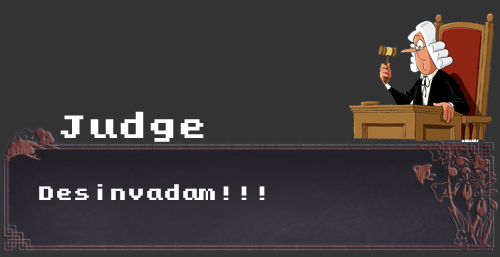
<style>
.page{position:relative;width:500px;height:257px;background:#333333}
.page>*{position:absolute;margin:0}
.t1{font:30px "KongtextRegular";color:#ffffff}
.t2{font:18px "KongtextRegular";color:#fefefe}
</style>
<div class="page">
<p class="t1" style="left:60px;top:111px;width:144px;height:31px">Judge</p>
<p class="t2" style="left:39px;top:184px;width:226px;height:16px">Desinvadam!!!</p>
</div>
